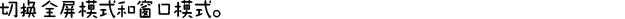
<style>
.page{position:relative;width:625px;height:19px;background:#ffffff}
.page>*{position:absolute;margin:0}
.t1{font:22px "¢è?";color:#000000}
</style>
<div class="page">
<p class="t1" style="left:0px;top:0px;width:221px;height:19px">切换全屏模式和窗口模式。</p>
</div>
